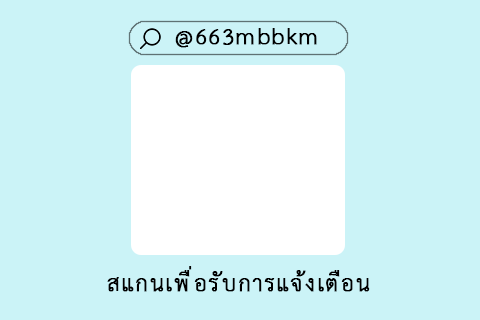
<style>
.page{position:relative;width:480px;height:320px;background:#cbf3f7}
.page>*{position:absolute;margin:0}
.t1{font:32.3px "THSarabunPSK";letter-spacing:0.03em;color:#000000;font-weight:bold}
</style>
<div class="page">
<p class="t1" style="left:175px;top:28px;width:142px;height:20px">@663mbbkm</p>
<p class="t1" style="left:107px;top:266px;width:263px;height:26px">สแกนเพื่อรับการแจ้งเตือน</p>
</div>
